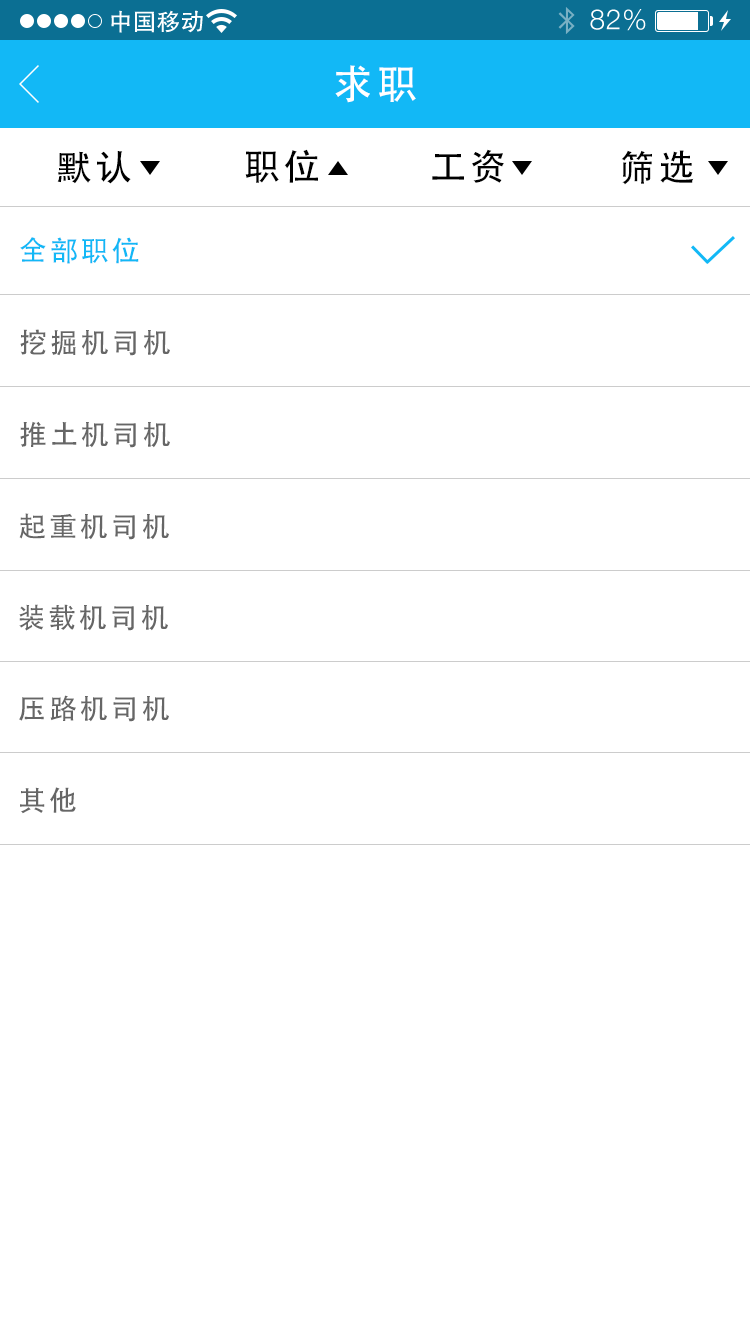
<style>
.page{position:relative;width:750px;height:1334px;background:#ffffff}
.page>*{position:absolute;margin:0}
.t1{font:40px "AdobeHeitiStd-Regular";letter-spacing:0.104em;color:#ffffff}
.t2{font:36px "AdobeHeitiStd-Regular";letter-spacing:0.104em;color:#000000}
.t3{font:28px "AdobeHeitiStd-Regular";letter-spacing:0.104em;color:#12b8f6}
.t4{font:28px "AdobeHeitiStd-Regular";letter-spacing:0.104em;color:#666666}
</style>
<div class="page">
<p class="t1" style="left:335px;top:65px;width:81px;height:38px">求职</p>
<p class="t2" style="left:245px;top:149px;width:73px;height:34px">职位</p>
<p class="t2" style="left:432px;top:149px;width:72px;height:34px">工资</p>
<p class="t2" style="left:621px;top:150px;width:73px;height:35px">筛选</p>
<p class="t2" style="left:57px;top:151px;width:74px;height:33px">默认</p>
<p class="t3" style="left:20px;top:237px;width:119px;height:27px">全部职位</p>
<p class="t4" style="left:20px;top:329px;width:150px;height:27px">挖掘机司机</p>
<p class="t4" style="left:20px;top:421px;width:150px;height:27px">推土机司机</p>
<p class="t4" style="left:19px;top:513px;width:150px;height:27px">起重机司机</p>
<p class="t4" style="left:19px;top:604px;width:149px;height:27px">装载机司机</p>
<p class="t4" style="left:19px;top:695px;width:150px;height:27px">压路机司机</p>
<p class="t4" style="left:20px;top:787px;width:56px;height:27px">其他</p>
</div>
